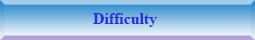
<style>
.page{position:relative;width:255px;height:40px}
.page>*{position:absolute;margin:0}
.t1{font:15.8px "TimesNewRomanPS-BoldMT";color:#2c32d2}
</style>
<div class="page">
<p class="t1" style="left:93px;top:13px;width:64px;height:14px">Difficulty</p>
</div>
